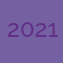
<style>
.page{position:relative;width:63px;height:63px;background:#7560a2}
.page>*{position:absolute;margin:0}
.t1{font:24px "Raleway-Medium";color:#623089}
</style>
<div class="page">
<p class="t1" style="left:7px;top:22px;width:51px;height:15px">2021</p>
</div>
